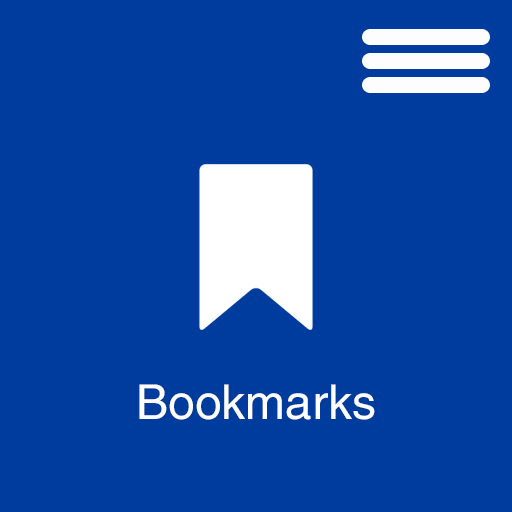
<style>
.page{position:relative;width:512px;height:512px;background:#003c9e}
.page>*{position:absolute;margin:0}
.t1{font:48px "Helvetica";color:#ffffff}
</style>
<div class="page">
<p class="t1" style="left:139px;top:384px;width:236px;height:36px">Bookmarks</p>
</div>
